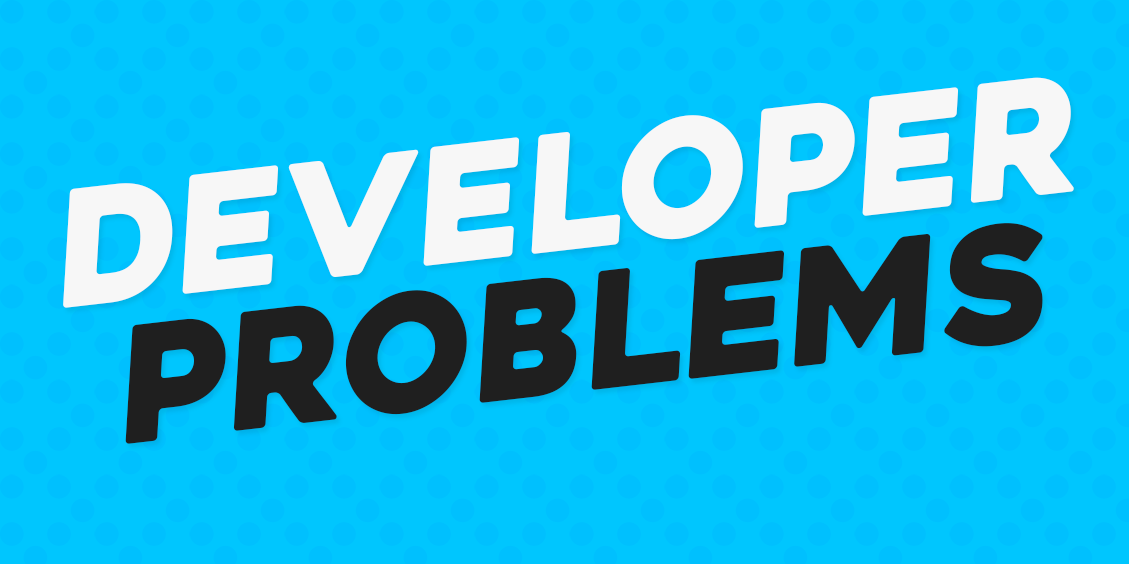
<style>
.page{position:relative;width:1129px;height:564px;background:#00c6fe}
.page>*{position:absolute;margin:0}
.t1{font:160px "Heavitas";color:#f7f7f7;font-style:italic}
.t2{font:160px "Heavitas";color:#1f1f1f;font-style:italic}
</style>
<div class="page">
<p class="t1" style="left:63px;top:77px;width:1011px;height:231px;rotate:-7deg">DEVELOPER</p>
<p class="t2" style="left:125px;top:223px;width:918px;height:221px;rotate:-7deg">PROBLEMS</p>
</div>
